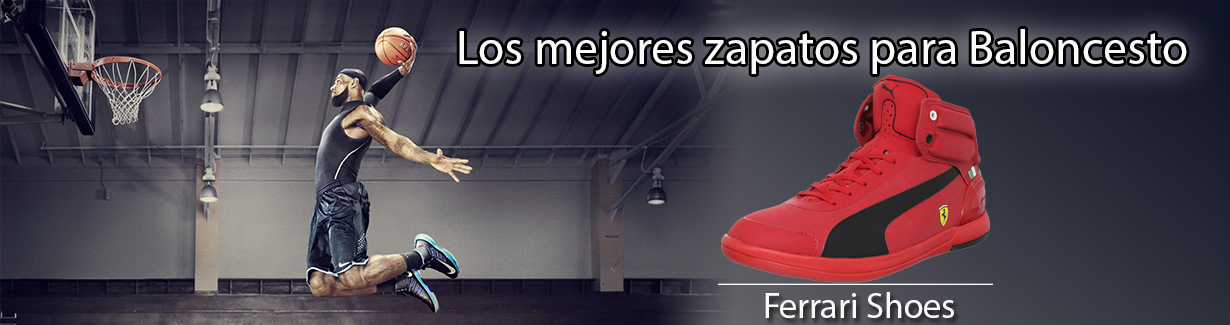
<style>
.page{position:relative;width:1230px;height:325px}
.page>*{position:absolute;margin:0}
.t1{font:48px "MyriadPro-Regular";color:#fafaf9}
.t2{font:36px "MyriadPro-Regular";color:#fafaf9}
</style>
<div class="page">
<p class="t1" style="left:459px;top:29px;width:728px;height:45px">Los mejores zapatos para Baloncesto</p>
<p class="t2" style="left:765px;top:292px;width:189px;height:26px">Ferrari Shoes</p>
</div>
